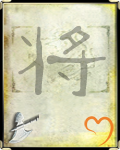
<style>
.page{position:relative;width:120px;height:150px}
.page>*{position:absolute;margin:0}
.t1{font:100px "FZGLJW--GB1-0";color:#9b9c88}
</style>
<div class="page">
<p class="t1" style="left:18px;top:26px;width:88px;height:71px">将</p>
</div>
